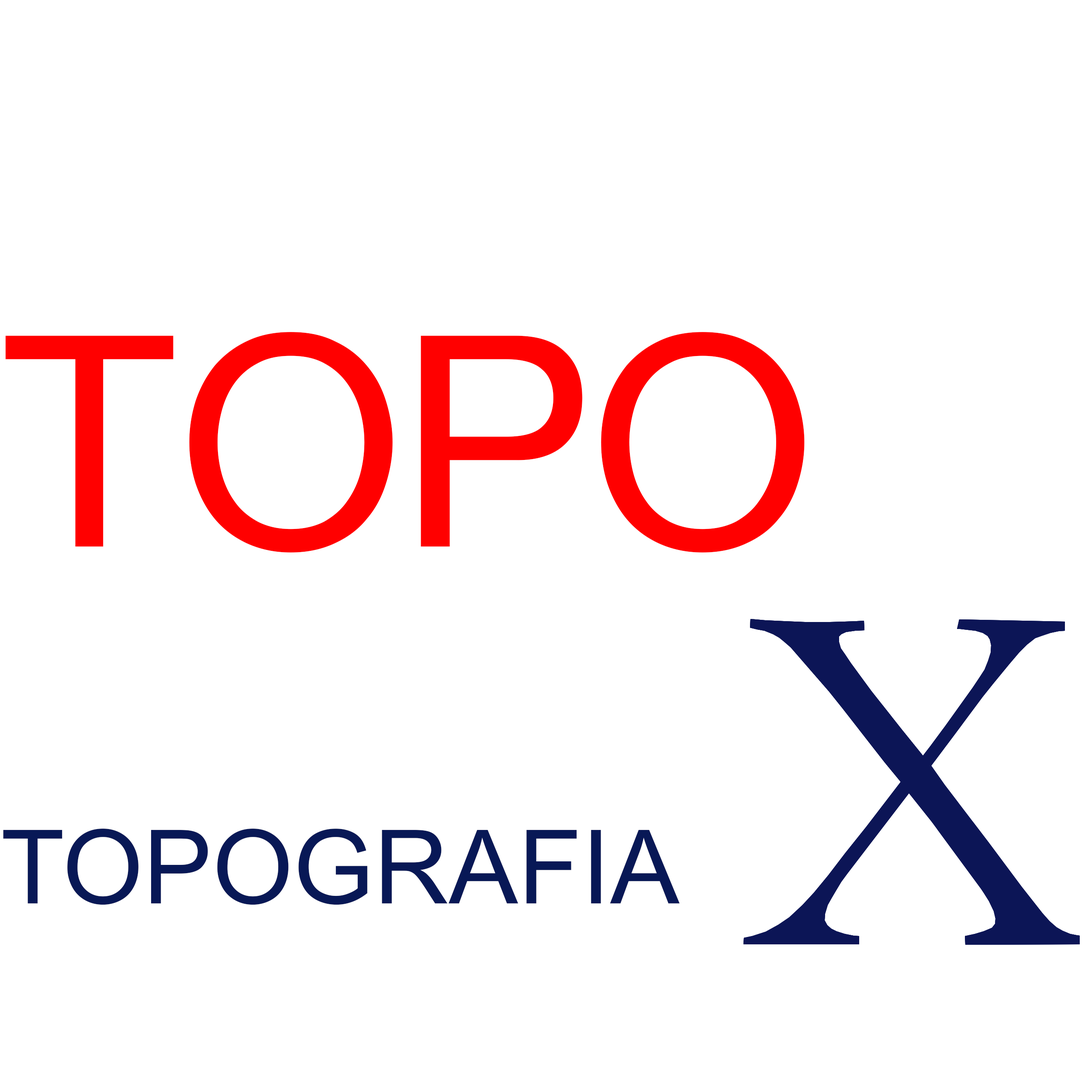
<style>
.page{position:relative;width:1092px;height:1092px;background:#ffffff}
.page>*{position:absolute;margin:0}
.t1{font:372.4px "FLURORegular";color:#ff0000;scale:0.94 1}
.t2{font:102.6px "ArialMT";color:#081856}
</style>
<div class="page">
<p class="t1" style="left:5px;top:332px;width:800px;height:221px">TOPO</p>
<p class="t2" style="left:3px;top:829px;width:677px;height:76px">TOPOGRAFIA</p>
</div>
